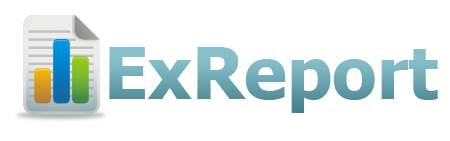
<style>
.page{position:relative;width:450px;height:141px;background:#ffffff}
.page>*{position:absolute;margin:0}
.t1{font:72px "Tahoma-Bold";color:#73acb7}
</style>
<div class="page">
<p class="t1" style="left:109px;top:47px;width:329px;height:66px">ExReport</p>
</div>
